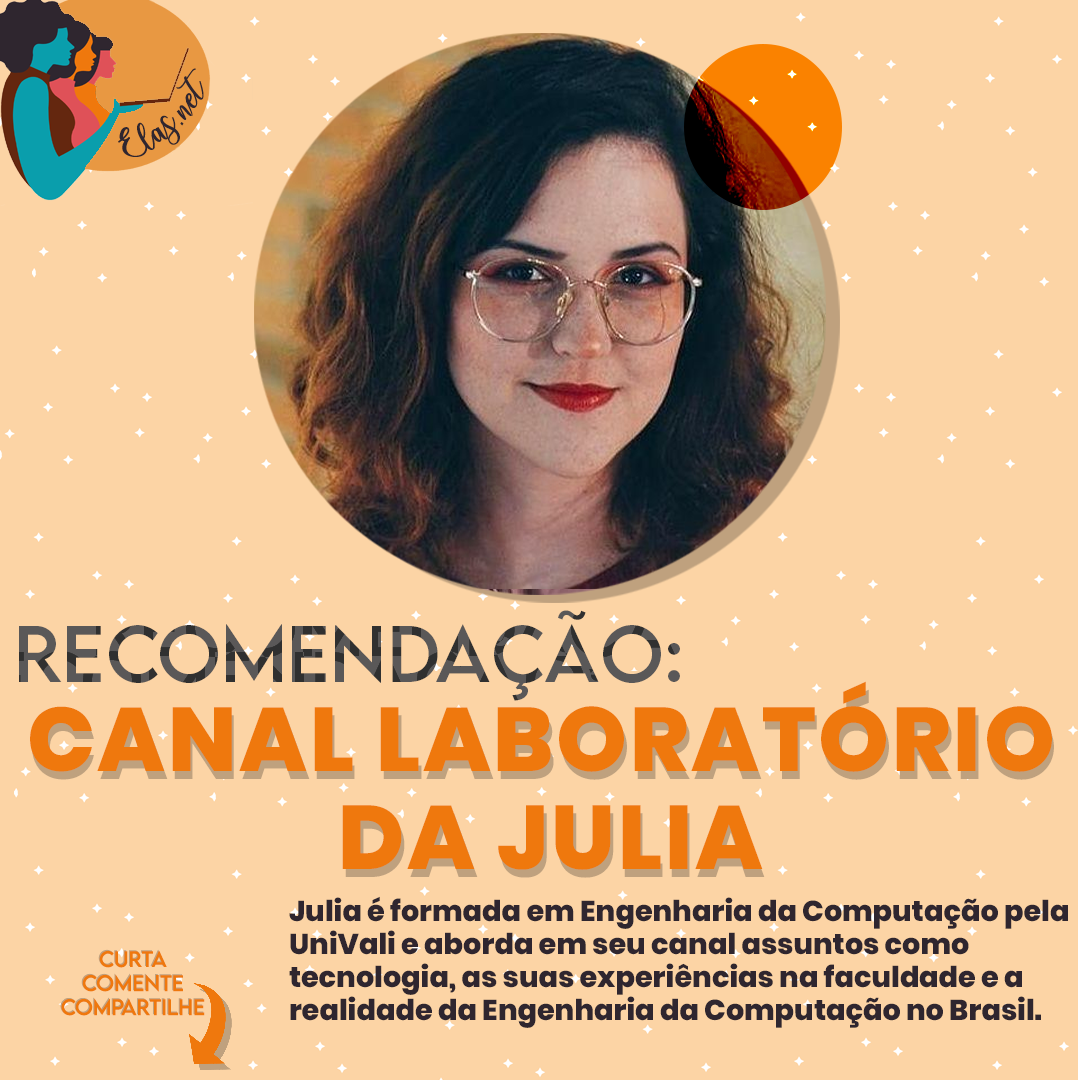
<style>
.page{position:relative;width:1080px;height:1080px;background:#fcd4a5}
.page>*{position:absolute;margin:0}
.t1{font:25px "charlinda-Regular";color:#2f262f;scale:1.18 1}
.t2{font:71.7px "LEMONMILK-Regular";letter-spacing:0.005em}
.t3{font:90px/98.3px "Poppins-ExtraBold";letter-spacing:0.03em;color:#ef780d}
.t4{font:28.7px/33.2px "Poppins-ExtraBold";color:#2f262f}
.t5{font:20px "LEMONMILK-Regular"}
.t6{font:20px "LEMONMILK-Regular";color:#ef780d}
</style>
<div class="page">
<p class="t1" style="left:118px;top:68px;width:86px;height:89px;rotate:-43deg">Elas.net</p>
<p class="t2" style="left:19px;top:610px;width:661px;height:91px">Recomendação:</p>
<p class="t3" style="left:30px;top:681px;width:1022px;height:189px;text-align:center">CANAL LABORATÓRIO <br>DA JULIA</p>
<p class="t3" style="left:32px;top:689px;width:1022px;height:189px;text-align:center">CANAL LABORATÓRIO<br> DA JULIA</p>
<p class="t4" style="left:289px;top:896px;width:779px;height:132px">Julia é formada em Engenharia da Computação pela <br>UniVali e aborda em seu canal assuntos como <br>tecnologia, as suas experiências na faculdade e a <br>realidade da Engenharia da Computação no Brasil.</p>
<p class="t5" style="left:60px;top:949px;width:144px;height:66px;text-align:center">Curta<br>Comente<br>Compartilhe</p>
<p class="t6" style="left:61px;top:950px;width:144px;height:66px;text-align:center">Curta<br>Comente<br>Compartilhe</p>
</div>
